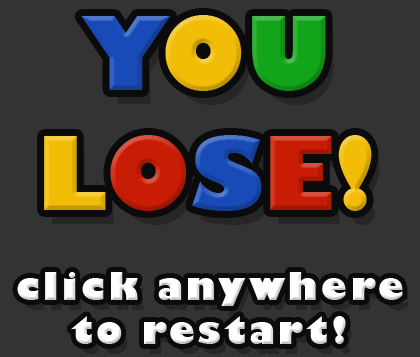
<style>
.page{position:relative;width:420px;height:357px;background:#333333}
.page>*{position:absolute;margin:0}
.t1{font:99.3px "GillSans-UltraBold";color:#184bb8}
.t2{font:99.3px "GillSans-UltraBold";color:#f2bd06}
.t3{font:99.3px "GillSans-UltraBold";color:#12a51a}
.t4{font:99.3px "GillSans-UltraBold";color:#c81c04}
.t5{font:36.6px "GillSans-UltraBold";letter-spacing:0.1em;color:#ffffff}
</style>
<div class="page">
<p class="t1" style="left:44px;top:15px;width:328px;height:196px;text-align:center">Y<span class="t2">O</span><span class="t3">U<br></span><span class="t2">L</span><span class="t4">O</span>S<span class="t4">E</span><span class="t2">!</span></p>
<p class="t5" style="left:17px;top:272px;width:386px;height:72px;text-align:center">click anywhere<br>to restart!</p>
</div>
